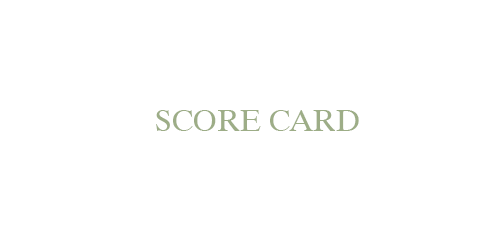
<style>
.page{position:relative;width:500px;height:250px;background:#ffffff}
.page>*{position:absolute;margin:0}
.t1{font:30px "Dutch801BT-Roman";color:#9dad87}
</style>
<div class="page">
<p class="t1" style="left:156px;top:110px;width:203px;height:21px">SCORE CARD</p>
</div>
